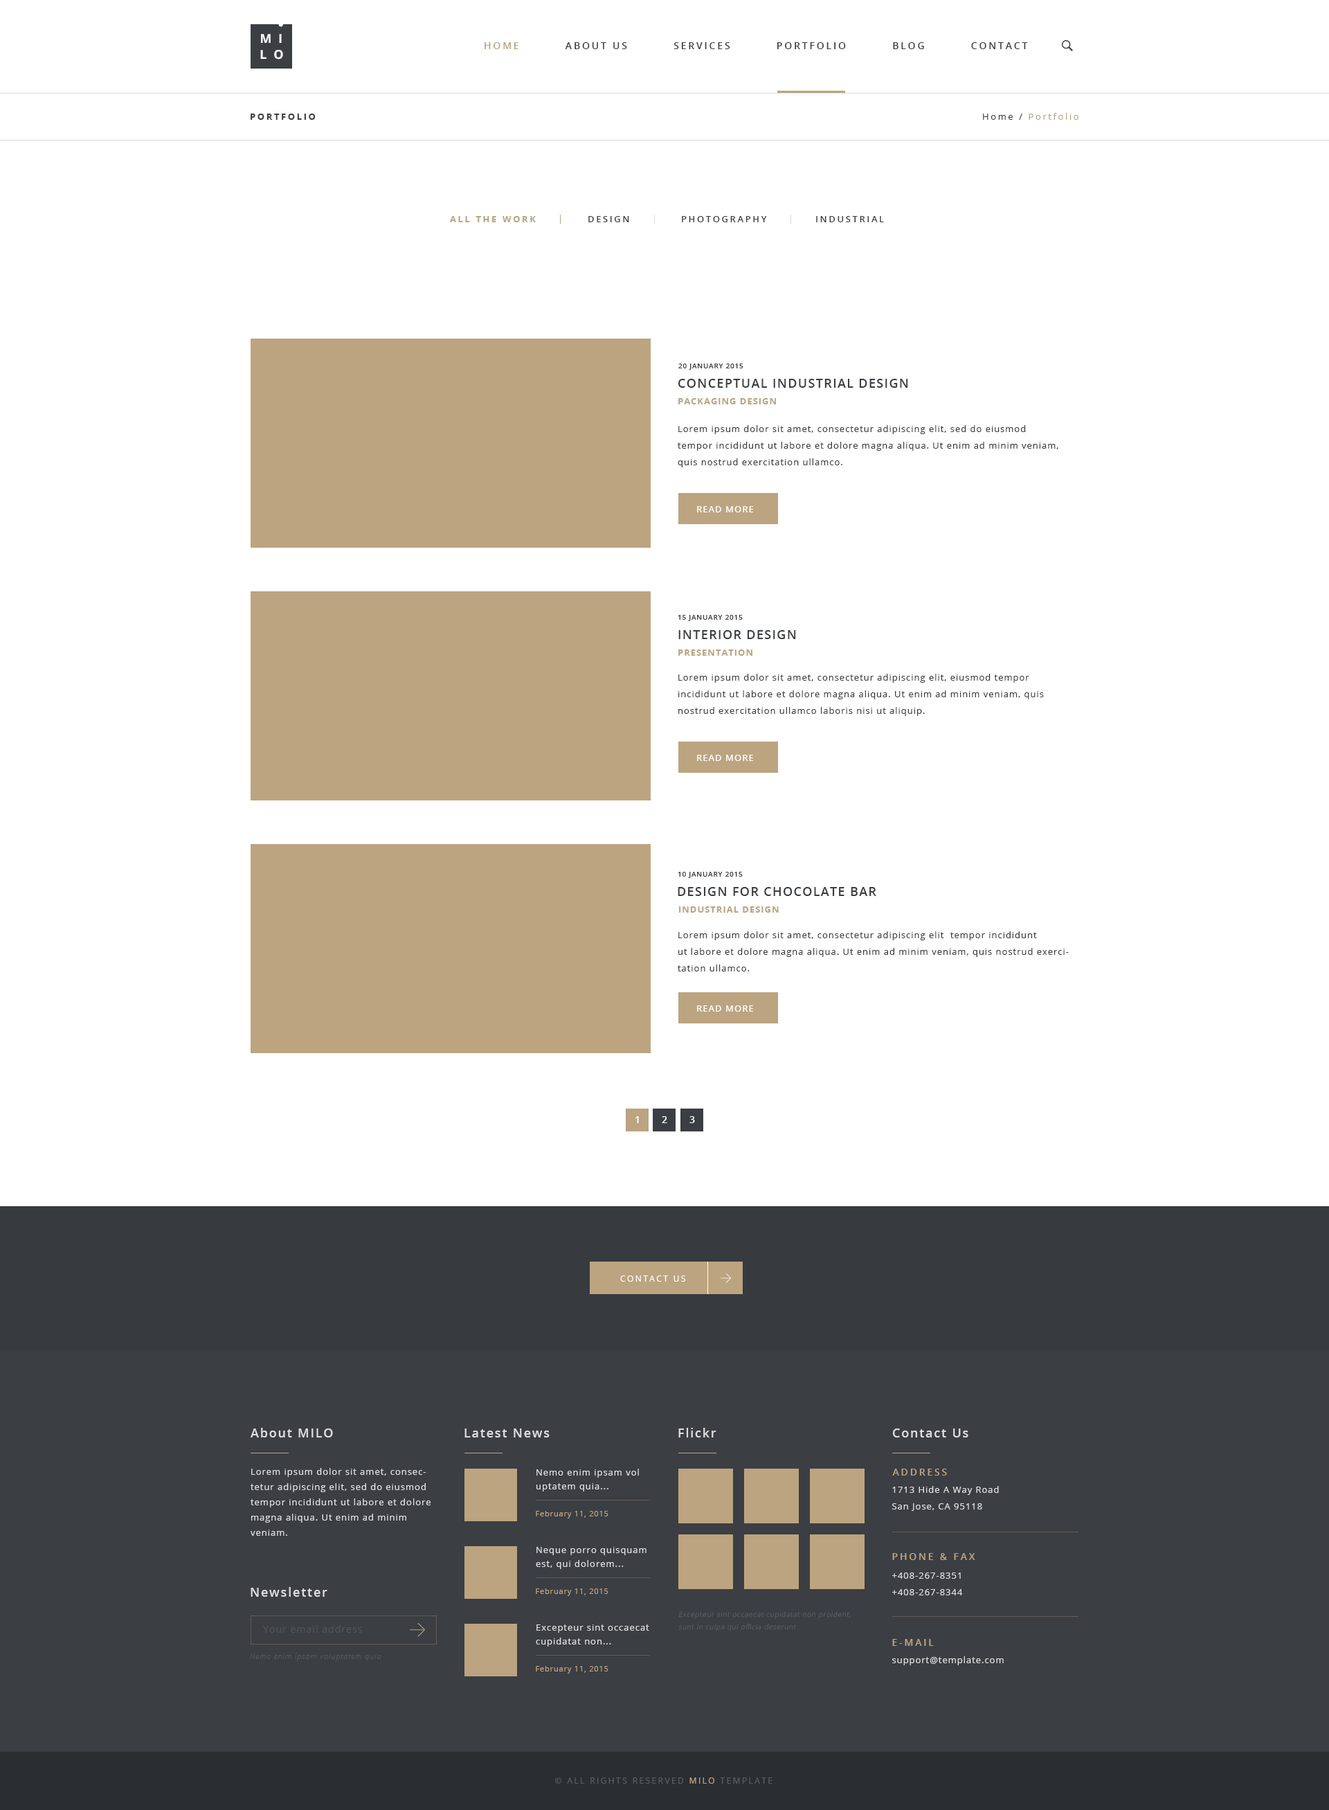
<style>
.page{position:relative;width:1329px;height:1810px;background:#ffffff}
.page>*{position:absolute;margin:0}
.t1{font:12.5px "OpenSans-Bold";letter-spacing:0.55em;color:#ffffff;text-transform:uppercase}
.t2{font:9.7px "OpenSans-Semibold";letter-spacing:0.2em;color:#3b3e43;text-transform:uppercase}
.t3{font:9.7px "OpenSans-Semibold";letter-spacing:0.2em;color:#bca480;text-transform:uppercase}
.t4{font:9px "OpenSans-Bold";letter-spacing:0.2em;color:#3b3e43;text-transform:uppercase}
.t5{font:9px "OpenSans";letter-spacing:0.2em;color:#bca480}
.t6{font:9px "OpenSans";letter-spacing:0.2em;color:#3b3e43}
.t7{font:9px "OpenSans-Bold";letter-spacing:0.2em;color:#bca480;text-transform:uppercase}
.t8{font:9px "OpenSans-Semibold";letter-spacing:0.2em;color:#3b3e43;text-transform:uppercase}
.t9{font:6.9px "OpenSans-Semibold";letter-spacing:0.075em;color:#3b3e43;text-transform:uppercase}
.t10{font:12.5px "OpenSans-Semibold";letter-spacing:0.075em;color:#3b3e43;text-transform:uppercase}
.t11{font:9px "OpenSans-Bold";letter-spacing:0.075em;color:#bca480;text-transform:uppercase}
.t12{font:9px/16.6px "OpenSans";letter-spacing:0.075em;color:#3b3e43}
.t13{font:9px "OpenSans-Semibold";letter-spacing:0.075em;color:#ffffff;text-transform:uppercase}
.t14{font:9.7px "OpenSans-Semibold";letter-spacing:0.2em;color:#ffffff}
.t15{font:8.3px "OpenSans";letter-spacing:0.2em;color:#ffffff;text-transform:uppercase}
.t16{font:12.5px "OpenSans-Semibold";letter-spacing:0.1em;color:#dddddd}
.t17{font:9px/15.2px "OpenSans";letter-spacing:0.075em;color:#dddddd}
.t18{font:9px/13.8px "OpenSans";letter-spacing:0.075em;color:#dddddd}
.t19{font:9px/16.6px "OpenSans";letter-spacing:0.075em;color:#dddddd}
.t20{font:7.6px "OpenSans";letter-spacing:0.075em;color:#bca480}
.t21{font:9px/16.6px "OpenSans-Semibold";letter-spacing:0.075em;color:#dddddd}
.t22{font:6.9px/12.5px "OpenSans-Light";letter-spacing:0.075em;color:#585c62;font-style:italic}
.t23{font:9.7px "OpenSans";letter-spacing:0.075em;color:#505459}
.t24{font:7.6px "OpenSansLight-Italic";letter-spacing:0.075em;color:#53575d}
.t25{font:9px "OpenSans";letter-spacing:0.075em;color:#dddddd}
.t26{font:8.3px "OpenSans";letter-spacing:0.2em;color:#585c62;text-transform:uppercase}
.t27{font:8.3px "OpenSans";letter-spacing:0.2em;color:#bca480;text-transform:uppercase}
</style>
<div class="page">
<p class="t1" style="left:261px;top:34px;width:21px;height:9px">mi</p>
<p class="t1" style="left:260px;top:50px;width:23px;height:10px">lo</p>
<p class="t2" style="left:485px;top:42px;width:543px;height:7px"><span class="t3">Home          </span>About Us          Services          Portfolio          Blog          Contact</p>
<p class="t4" style="left:251px;top:114px;width:65px;height:6px">Portfolio</p>
<p class="t5" style="left:983px;top:113px;width:96px;height:7px"><span class="t6">Home / </span>Portfolio</p>
<p class="t7" style="left:450px;top:216px;width:86px;height:6px">all the work</p>
<p class="t8" style="left:588px;top:216px;width:41px;height:6px">Design</p>
<p class="t8" style="left:682px;top:216px;width:85px;height:6px">Photography</p>
<p class="t8" style="left:816px;top:216px;width:68px;height:6px">industrial</p>
<p class="t9" style="left:678px;top:363px;width:66px;height:7px">20 January 2015</p>
<p class="t10" style="left:678px;top:379px;width:230px;height:9px">Conceptual industrial design</p>
<p class="t11" style="left:678px;top:398px;width:98px;height:6px">packaging design</p>
<p class="t12" style="left:678px;top:425px;width:381px;height:42px">Lorem ipsum dolor sit amet, consectetur adipiscing elit, sed do eiusmod <br>tempor incididunt ut labore et dolore magna aliqua. Ut enim ad minim veniam, quis nostrud exercitation ullamco.</p>
<p class="t13" style="left:697px;top:506px;width:57px;height:6px">Read more</p>
<p class="t9" style="left:678px;top:615px;width:65px;height:6px">15 January 2015</p>
<p class="t10" style="left:678px;top:630px;width:118px;height:9px">interior design</p>
<p class="t11" style="left:678px;top:649px;width:75px;height:7px">presentation</p>
<p class="t12" style="left:678px;top:674px;width:366px;height:42px">Lorem ipsum dolor sit amet, consectetur adipiscing elit, eiusmod tempor <br>incididunt ut labore et dolore magna aliqua. Ut enim ad minim veniam, quis <br>nostrud exercitation ullamco laboris nisi ut aliquip.</p>
<p class="t13" style="left:697px;top:755px;width:57px;height:6px">Read more</p>
<p class="t9" style="left:678px;top:872px;width:65px;height:6px">10 January 2015</p>
<p class="t10" style="left:678px;top:887px;width:198px;height:9px">design for chocolate bar</p>
<p class="t11" style="left:679px;top:906px;width:100px;height:6px">industrial design</p>
<p class="t12" style="left:678px;top:931px;width:391px;height:40px">Lorem ipsum dolor sit amet, consectetur adipiscing elit  tempor incididunt <br>ut labore et dolore magna aliqua. Ut enim ad minim veniam, quis nostrud exercitation ullamco.</p>
<p class="t13" style="left:697px;top:1005px;width:57px;height:6px">Read more</p>
<p class="t14" style="left:636px;top:1116px;width:3px;height:7px">1</p>
<p class="t14" style="left:662px;top:1116px;width:5px;height:7px">2</p>
<p class="t14" style="left:690px;top:1116px;width:5px;height:7px">3</p>
<p class="t15" style="left:620px;top:1275px;width:65px;height:6px">contact us</p>
<p class="t16" style="left:251px;top:1428px;width:82px;height:9px">About MILO</p>
<p class="t16" style="left:465px;top:1428px;width:85px;height:9px">Latest News</p>
<p class="t16" style="left:678px;top:1428px;width:39px;height:9px">Flickr</p>
<p class="t16" style="left:892px;top:1428px;width:77px;height:9px">Contact Us</p>
<p class="t17" style="left:251px;top:1468px;width:180px;height:68px">Lorem ipsum dolor sit amet, consectetur adipiscing elit, sed do eiusmod tempor incididunt ut labore et dolore magna aliqua. Ut enim ad minim veniam.</p>
<p class="t18" style="left:536px;top:1468px;width:103px;height:23px">Nemo enim ipsam vol uptatem quia...</p>
<p class="t3" style="left:892px;top:1468px;width:55px;height:7px">Address</p>
<p class="t19" style="left:892px;top:1486px;width:107px;height:25px">1713 Hide A Way Road<br>San Jose, CA 95118</p>
<p class="t20" style="left:536px;top:1511px;width:73px;height:7px">February 11, 2015</p>
<p class="t18" style="left:536px;top:1547px;width:111px;height:22px">Neque porro quisquam est, qui dolorem...</p>
<p class="t3" style="left:892px;top:1553px;width:83px;height:7px">Phone &amp; Fax</p>
<p class="t19" style="left:892px;top:1572px;width:71px;height:23px"><span class="t21"><br></span>+408-267-8351<br>+408-267-8344</p>
<p class="t16" style="left:251px;top:1587px;width:76px;height:9px">Newsletter</p>
<p class="t20" style="left:536px;top:1588px;width:73px;height:8px">February 11, 2015</p>
<p class="t22" style="left:678px;top:1611px;width:173px;height:20px">Excepteur sint occaecat cupidatat non proident, sunt in culpa qui officia deserunt</p>
<p class="t23" style="left:263px;top:1625px;width:99px;height:7px">Your email address</p>
<p class="t18" style="left:536px;top:1624px;width:113px;height:22px">Excepteur sint occaecat cupidatat non...</p>
<p class="t3" style="left:892px;top:1639px;width:42px;height:7px">E-mail</p>
<p class="t24" style="left:250px;top:1653px;width:131px;height:8px">Nemo enim ipsam voluptatem quia</p>
<p class="t25" style="left:892px;top:1656px;width:112px;height:9px">support@template.com</p>
<p class="t20" style="left:536px;top:1666px;width:73px;height:7px">February 11, 2015</p>
<p class="t26" style="left:555px;top:1777px;width:218px;height:6px">© All Rights Reserved <span class="t27">MILO</span> template</p>
</div>
